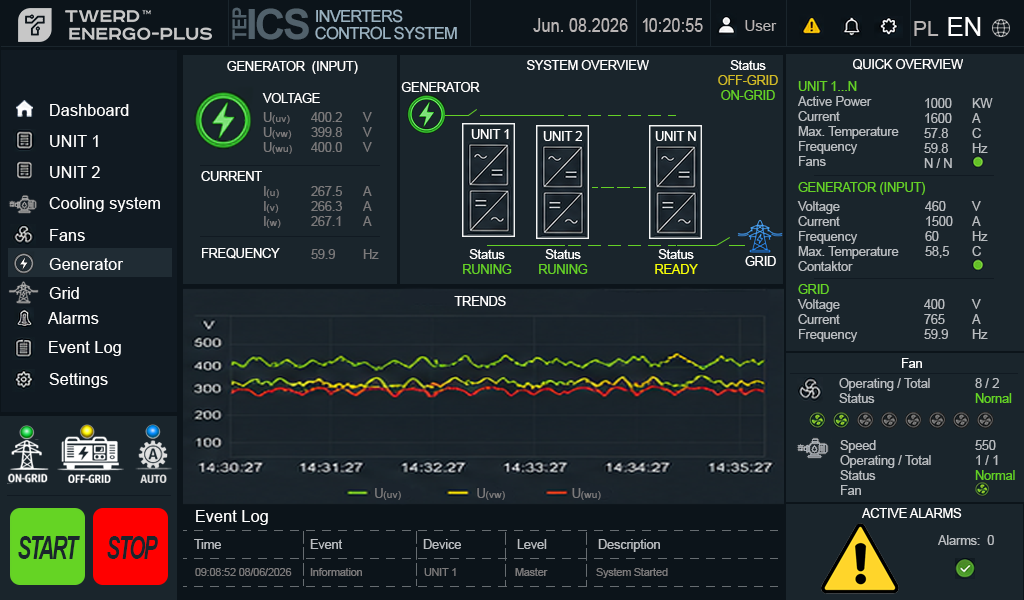
<style>
.page{position:relative;width:1024px;height:600px;background:#1a252c}
.page>*{position:absolute;margin:0}
.t1{font:19.1px "Arial-BoldMT";letter-spacing:-0.05em;color:#51616b;scale:0.94 1}
.t2{font:41.7px "Arial-BoldMT";letter-spacing:-0.05em;color:#51616b}
.t3{font:16.7px/16.7px "ArialMT";letter-spacing:-0.05em;color:#9ab2c1}
.t4{font:25.7px "ArialMT";color:#ffffff}
.t5{font:19px "ArialMT";color:#b9b5b5;scale:0.86 1}
.t6{font:15px "ArialMT";color:#b9b5b5}
.t7{font:21px "ArialMT";color:#b9b5b5}
.t8{font:12.5px "ArialMT";color:#ffffff}
.t9{font:12.5px "ArialMT";color:#d1bb26}
.t10{font:12.5px "ArialMT";color:#65d126}
.t11{font:12.5px "ArialMT";color:#b9bdc1}
.t12{font:16.4px "ArialMT";color:#ffffff}
.t13{font:10.4px "ArialMT";color:#7b7a7b}
.t14{font:12.5px "ArialMT";color:#7b7a7b}
.t15{font:12.5px "ArialMT";color:#f6ff02}
.t16{font:12.5px "ArialMT";color:#65d424}
.t17{font:12.5px "ArialMT";color:#63cf24}
.t18{font:32.4px "Arial-BoldItalicMT";letter-spacing:-0.075em;color:#1a252c;scale:0.63 1}
.t19{font:10.5px "ArialMT";color:#7b7a7b}
</style>
<div class="page">
<p class="t1" style="left:232px;top:7px;width:15px;height:33px;rotate:-90deg">TEP</p>
<p class="t2" style="left:248px;top:8px;width:61px;height:32px">ICS</p>
<p class="t3" style="left:315px;top:9px;width:142px;height:31px">INVERTERS <br>CONTROL SYSTEM</p>
<p class="t4" style="left:948px;top:17px;width:33px;height:19px">EN</p>
<p class="t5" style="left:533px;top:18px;width:95px;height:14px">Jun. 08.2026</p>
<p class="t5" style="left:642px;top:18px;width:61px;height:14px">10:20:55</p>
<p class="t6" style="left:745px;top:20px;width:32px;height:11px">User</p>
<p class="t7" style="left:914px;top:21px;width:25px;height:15px">PL</p>
<p class="t8" style="left:227px;top:61px;width:131px;height:13px">GENERATOR  (INPUT)</p>
<p class="t8" style="left:527px;top:60px;width:122px;height:10px">SYSTEM OVERVIEW</p>
<p class="t9" style="left:718px;top:60px;width:60px;height:40px;text-align:center"><span class="t8">Status<br></span>OFF-GRID<br><span class="t10">ON-GRID</span></p>
<p class="t8" style="left:853px;top:59px;width:110px;height:11px">QUICK OVERVIEW</p>
<p class="t8" style="left:401px;top:82px;width:79px;height:10px">GENERATOR</p>
<p class="t10" style="left:798px;top:81px;width:59px;height:10px">UNIT 1...N</p>
<p class="t8" style="left:262px;top:93px;width:58px;height:10px">VOLTAGE</p>
<p class="t11" style="left:798px;top:96px;width:101px;height:70px">Active Power <br>Current <br>Max. Temperature<br>Frequency<br>Fans</p>
<p class="t11" style="left:924px;top:98px;width:28px;height:70px">1000<br>1600 <br>57.8 <br>59.8 <br>N / N</p>
<p class="t11" style="left:972px;top:98px;width:21px;height:55px">KW <br>A <br>C <br>Hz</p>
<p class="t12" style="left:50px;top:104px;width:79px;height:12px">Dashboard</p>
<p class="t13" style="left:263px;top:112px;width:29px;height:42px"><span class="t14">U</span>(uv) <br><span class="t14">U</span>(vw) <br><span class="t14">U</span>(wu)</p>
<p class="t14" style="left:311px;top:112px;width:31px;height:40px">400.2<br>399.8<br>400.0</p>
<p class="t14" style="left:362px;top:112px;width:10px;height:40px">V<br>V<br>V</p>
<p class="t12" style="left:50px;top:135px;width:48px;height:12px">UNIT 1</p>
<p class="t8" style="left:471px;top:129px;width:38px;height:10px">UNIT 1</p>
<p class="t8" style="left:543px;top:131px;width:39px;height:10px">UNIT 2</p>
<p class="t8" style="left:655px;top:131px;width:41px;height:10px">UNIT N</p>
<p class="t12" style="left:50px;top:166px;width:50px;height:12px">UNIT 2</p>
<p class="t8" style="left:201px;top:171px;width:61px;height:10px">CURRENT</p>
<p class="t10" style="left:798px;top:182px;width:127px;height:13px">GENERATOR (INPUT)</p>
<p class="t12" style="left:49px;top:197px;width:111px;height:15px">Cooling system</p>
<p class="t13" style="left:264px;top:186px;width:17px;height:42px"><span class="t14">I</span>(u) <br><span class="t14">I</span>(v) <br><span class="t14">I</span>(w)</p>
<p class="t14" style="left:311px;top:186px;width:31px;height:40px">267.5<br>266.3<br>267.1</p>
<p class="t14" style="left:363px;top:186px;width:9px;height:40px">A<br>A<br>A</p>
<p class="t11" style="left:797px;top:201px;width:102px;height:70px">Voltage<br>Current <br>Frequency<br>Max. Temperature<br>Contaktor</p>
<p class="t11" style="left:925px;top:201px;width:28px;height:57px">460<br>1500<br>60<br>58,5</p>
<p class="t11" style="left:971px;top:201px;width:17px;height:55px">V<br>A<br>Hz<br>C</p>
<p class="t12" style="left:50px;top:229px;width:35px;height:12px">Fans</p>
<p class="t8" style="left:202px;top:248px;width:78px;height:11px">FREQUENCY</p>
<p class="t14" style="left:311px;top:249px;width:24px;height:10px">59.9</p>
<p class="t14" style="left:363px;top:249px;width:16px;height:10px">Hz</p>
<p class="t8" style="left:463px;top:249px;width:49px;height:25px;text-align:center">Status<br><span class="t10">RUNING</span></p>
<p class="t8" style="left:539px;top:249px;width:49px;height:25px;text-align:center">Status<br><span class="t10">RUNING</span></p>
<p class="t8" style="left:655px;top:249px;width:43px;height:25px;text-align:center">Status<br><span class="t15">READY</span></p>
<p class="t8" style="left:745px;top:256px;width:31px;height:10px">GRID</p>
<p class="t12" style="left:49px;top:258px;width:74px;height:12px">Generator</p>
<p class="t12" style="left:49px;top:287px;width:30px;height:12px">Grid</p>
<p class="t10" style="left:798px;top:284px;width:31px;height:10px">GRID</p>
<p class="t8" style="left:454px;top:296px;width:52px;height:10px">TRENDS</p>
<p class="t11" style="left:797px;top:299px;width:61px;height:43px">Voltage<br>Current <br>Frequency</p>
<p class="t11" style="left:924px;top:299px;width:24px;height:40px">400<br>765<br>59.9</p>
<p class="t11" style="left:971px;top:299px;width:17px;height:40px">V<br>A<br>Hz</p>
<p class="t12" style="left:48px;top:312px;width:51px;height:12px">Alarms</p>
<p class="t12" style="left:49px;top:341px;width:72px;height:15px">Event Log</p>
<p class="t8" style="left:902px;top:358px;width:20px;height:10px">Fan</p>
<p class="t12" style="left:49px;top:373px;width:59px;height:15px">Settings</p>
<p class="t11" style="left:839px;top:378px;width:91px;height:25px">Operating / Total <br>Status</p>
<p class="t16" style="left:975px;top:378px;width:37px;height:25px"><span class="t11">8 / 2<br></span>Nornal</p>
<p class="t11" style="left:840px;top:440px;width:91px;height:55px">Speed<br>Operating / Total <br>Status<br>Fan</p>
<p class="t11" style="left:975px;top:440px;width:40px;height:40px">550<br>1 / 1<br><span class="t17">Normal</span></p>
<p class="t13" style="left:375px;top:488px;width:226px;height:12px"><span class="t14">U</span>(uv)                          <span class="t14">U</span>(vw)                       <span class="t14">U</span>(wu)</p>
<p class="t12" style="left:196px;top:510px;width:72px;height:15px">Event Log</p>
<p class="t8" style="left:862px;top:508px;width:100px;height:10px">ACTIVE ALARMS</p>
<p class="t18" style="left:18px;top:536px;width:62px;height:23px">START</p>
<p class="t18" style="left:107px;top:536px;width:51px;height:23px">STOP</p>
<p class="t11" style="left:194px;top:539px;width:27px;height:10px">Time</p>
<p class="t11" style="left:310px;top:539px;width:33px;height:10px">Event</p>
<p class="t11" style="left:423px;top:539px;width:38px;height:10px">Device</p>
<p class="t11" style="left:517px;top:539px;width:30px;height:10px">Level</p>
<p class="t11" style="left:598px;top:539px;width:62px;height:13px">Description</p>
<p class="t11" style="left:938px;top:535px;width:56px;height:10px">Alarms:  0</p>
<p class="t19" style="left:195px;top:568px;width:97px;height:8px">09:08:52 08/06/2026</p>
<p class="t19" style="left:310px;top:568px;width:52px;height:8px">Information</p>
<p class="t19" style="left:424px;top:568px;width:32px;height:8px">UNIT 1</p>
<p class="t19" style="left:515px;top:568px;width:33px;height:8px">Master</p>
<p class="t19" style="left:596px;top:568px;width:72px;height:10px">System Started</p>
</div>
